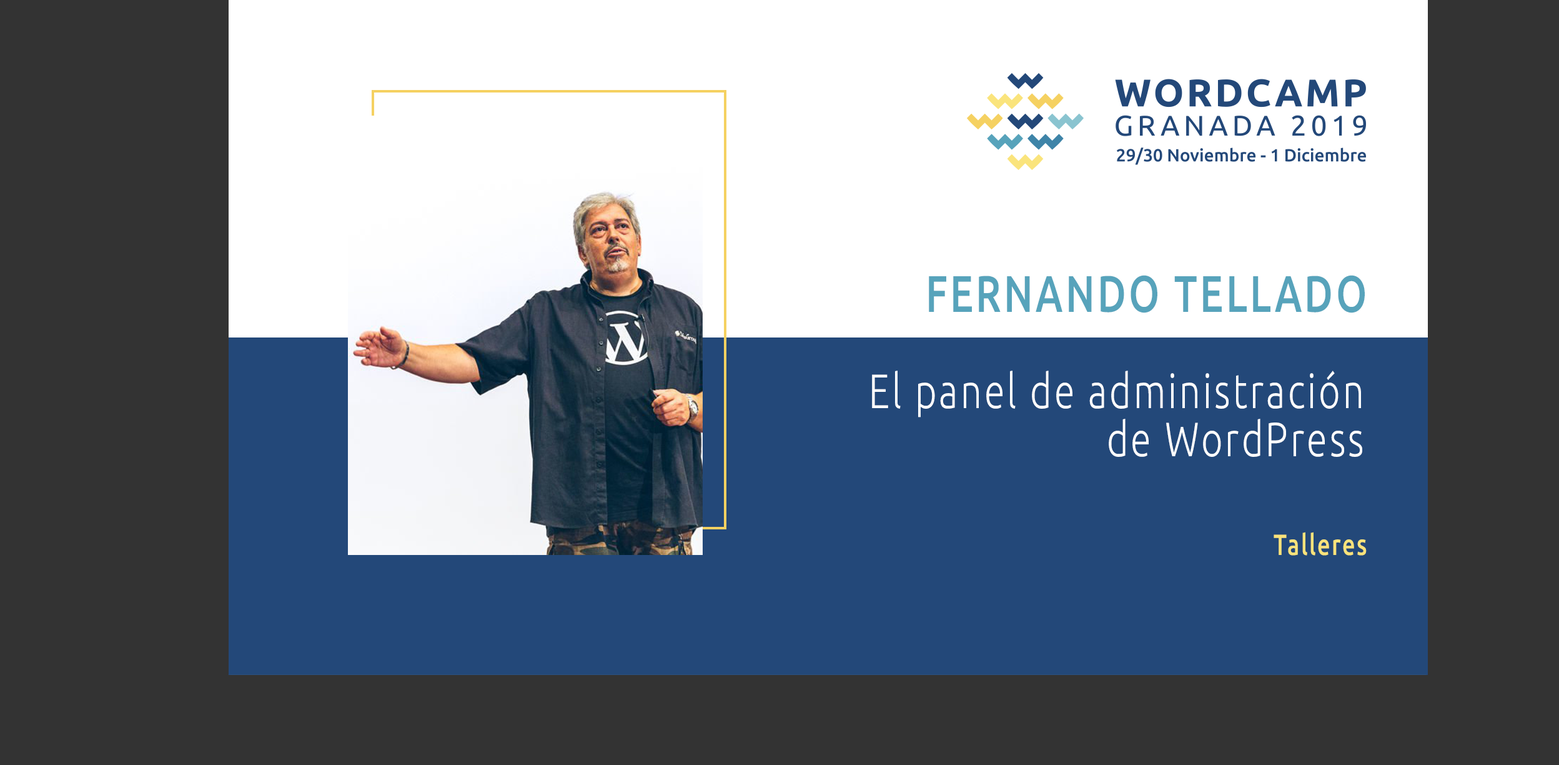
<style>
.page{position:relative;width:1559px;height:765px;background:#333333}
.page>*{position:absolute;margin:0}
.t1{font:51.4px "Ubuntu-Medium";letter-spacing:0.068em;color:#57a3bb;scale:0.77 1}
.t2{font:48.2px/48.2px "Ubuntu-Light";letter-spacing:0.068em;color:#ffffff;scale:0.77 1}
.t3{font:29.2px "Ubuntu-Medium";letter-spacing:0.068em;color:#f9e37b;scale:0.77 1}
</style>
<div class="page">
<p class="t1" style="left:929px;top:275px;width:436px;height:38px">FERNANDO TELLADO</p>
<p class="t2" style="left:872px;top:370px;width:491px;height:87px;text-align:right">El panel de administración de WordPress</p>
<p class="t3" style="left:1274px;top:532px;width:93px;height:23px">Talleres</p>
</div>
